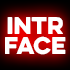
<style>
.page{position:relative;width:70px;height:70px}
.page>*{position:absolute;margin:0}
.t1{font:21.7px "EvelethCleanRegular";color:#ffffff}
</style>
<div class="page">
<p class="t1" style="left:7px;top:17px;width:56px;height:17px">INTR</p>
<p class="t1" style="left:5px;top:36px;width:61px;height:19px">FACE</p>
</div>
